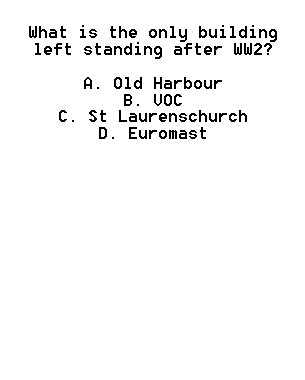
<style>
.page{position:relative;width:305px;height:380px;background:#ffffff}
.page>*{position:absolute;margin:0}
.t1{font:14px "8514oem";color:#000000}
</style>
<div class="page">
<p class="t1" style="left:29px;top:25px;width:248px;height:114px;text-align:center">What is the only building left standing after WW2? <br><br>A. Old Harbour <br>B. VOC <br>C. St Laurenschurch <br>D. Euromast</p>
</div>
